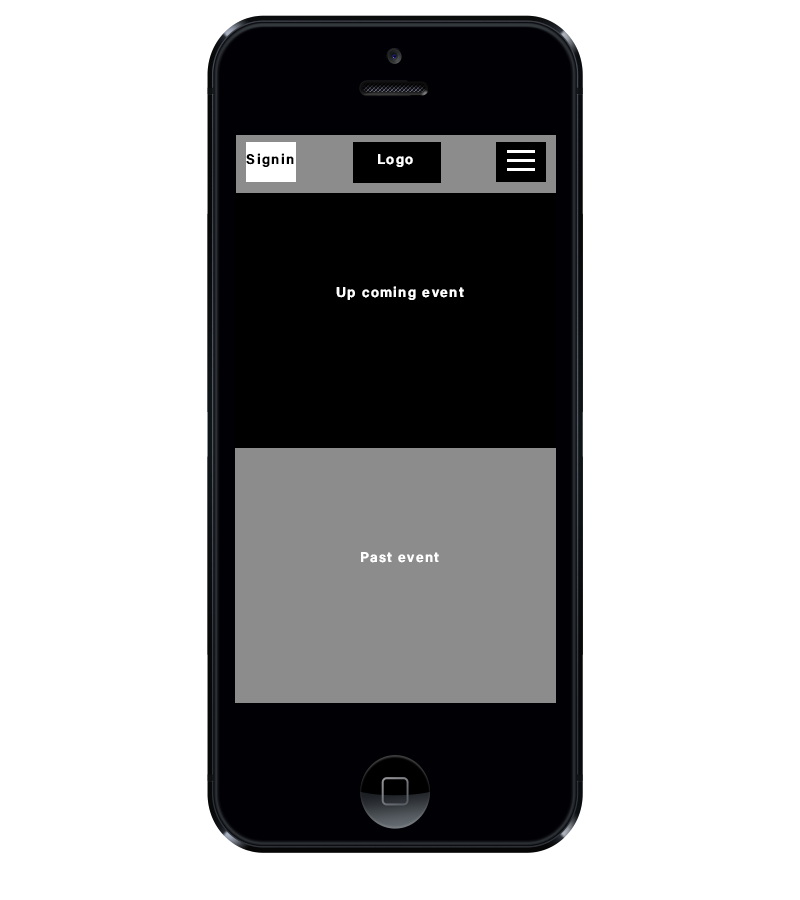
<style>
.page{position:relative;width:800px;height:900px;background:#ffffff}
.page>*{position:absolute;margin:0}
.t1{font:14px "AcuminConcept-Semibold";letter-spacing:0.1em;color:#000000}
.t2{font:14px "AcuminConcept-Semibold";letter-spacing:0.1em;color:#ffffff}
</style>
<div class="page">
<p class="t1" style="left:246px;top:153px;width:48px;height:14px">Signin</p>
<p class="t2" style="left:378px;top:154px;width:35px;height:13px">Logo</p>
<p class="t2" style="left:336px;top:286px;width:128px;height:14px">Up coming event</p>
<p class="t2" style="left:361px;top:552px;width:78px;height:11px">Past event</p>
</div>
